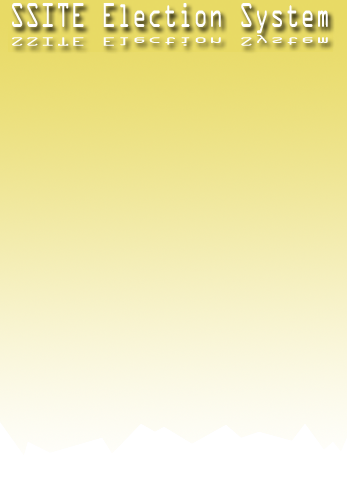
<style>
.page{position:relative;width:347px;height:500px}
.page>*{position:absolute;margin:0}
.t1{font:30.8px "OCRAStd";color:#ffffff;scale:0.69 1}
.t2{font:10.8px "OCRAStd";color:#ffffff;scale:1.96 1}
</style>
<div class="page">
<p class="t1" style="left:12px;top:3px;width:316px;height:31px">SSITE Election System</p>
<p class="t2" style="left:12px;top:35px;width:316px;height:11px">SSITE Election System</p>
</div>
